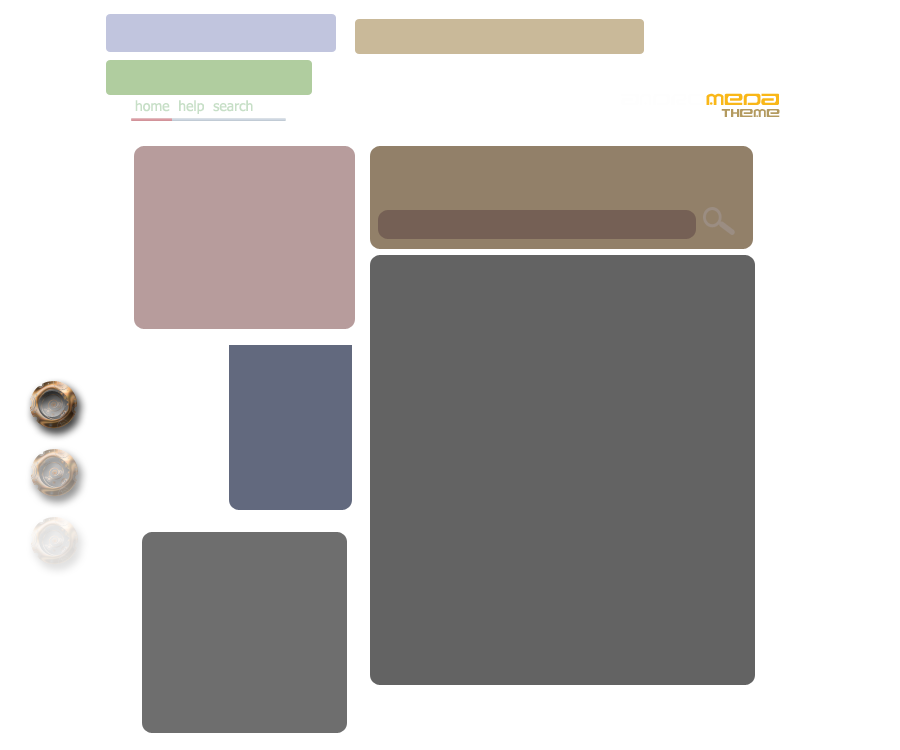
<style>
.page{position:relative;width:900px;height:750px;background:#ffffff}
.page>*{position:absolute;margin:0}
.t1{font:14px "Tahoma";color:#c6dec6}
.t2{font:14px "Raveflire";color:#fefefe}
.t3{font:14px "Raveflire";color:#f9b718}
.t4{font:10px "Raveflire";color:#b39a5f}
</style>
<div class="page">
<p class="t1" style="left:135px;top:100px;width:118px;height:14px">home  help  search</p>
<p class="t2" style="left:621px;top:93px;width:159px;height:24px;text-align:right">andro<span class="t3">meda<br></span><span class="t4">theme</span></p>
</div>
